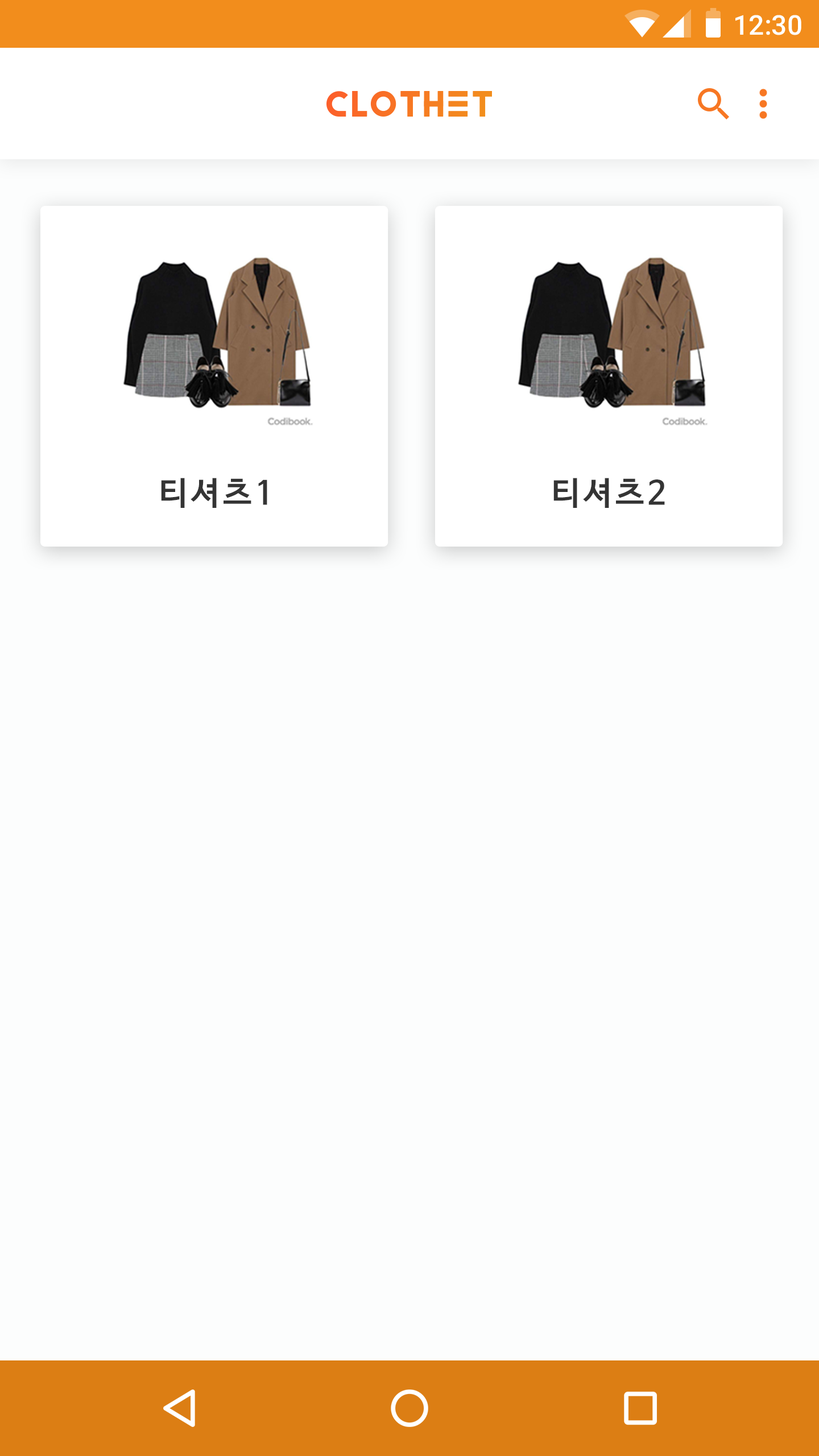
<style>
.page{position:relative;width:819px;height:1456px;background:#fcfdfd}
.page>*{position:absolute;margin:0}
.t1{font:27.3px "Roboto-Medium";color:#ffffff}
.t2{font:32.2px "NanumBarunGothicBold";letter-spacing:0.1em;color:#343434}
</style>
<div class="page">
<p class="t1" style="left:735px;top:15px;width:66px;height:20px">12:30</p>
<p class="t2" style="left:161px;top:478px;width:106px;height:30px">티셔츠1</p>
<p class="t2" style="left:553px;top:478px;width:112px;height:30px">티셔츠2</p>
</div>
